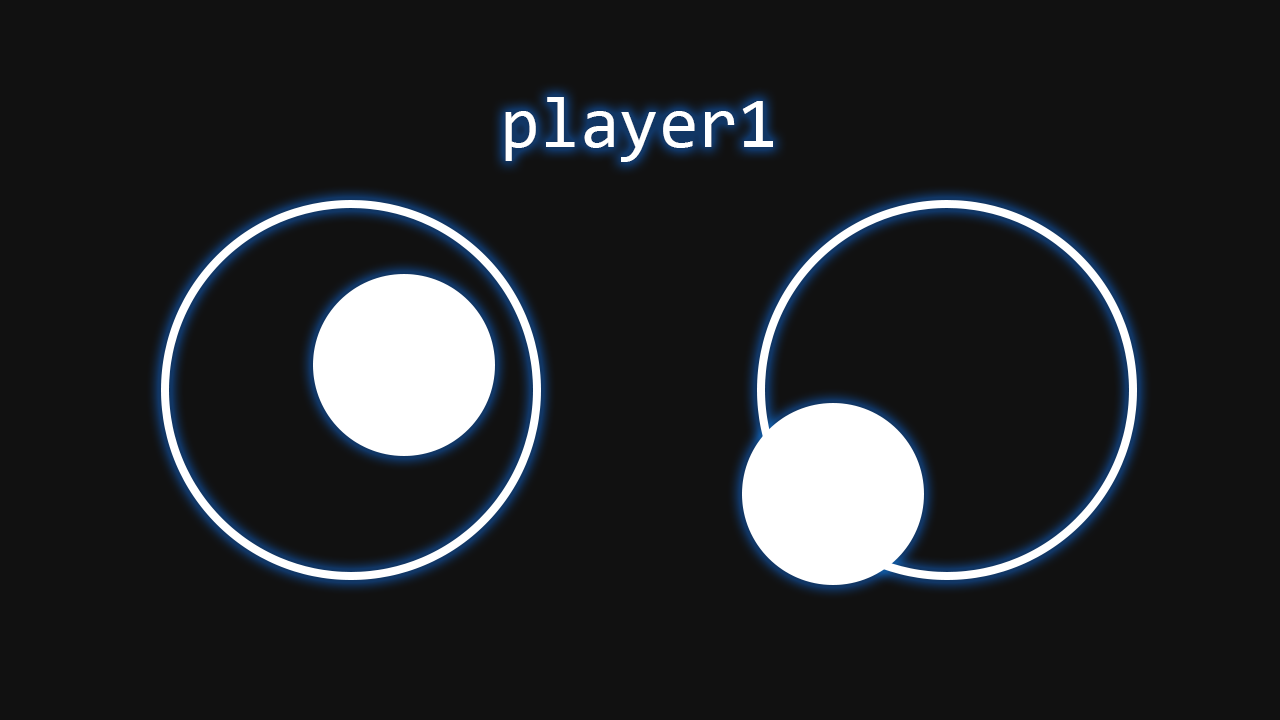
<style>
.page{position:relative;width:1280px;height:720px;background:#111111}
.page>*{position:absolute;margin:0}
.t1{font:72px "Consolas";color:#ffffff}
</style>
<div class="page">
<p class="t1" style="left:505px;top:97px;width:268px;height:65px">player1</p>
</div>
